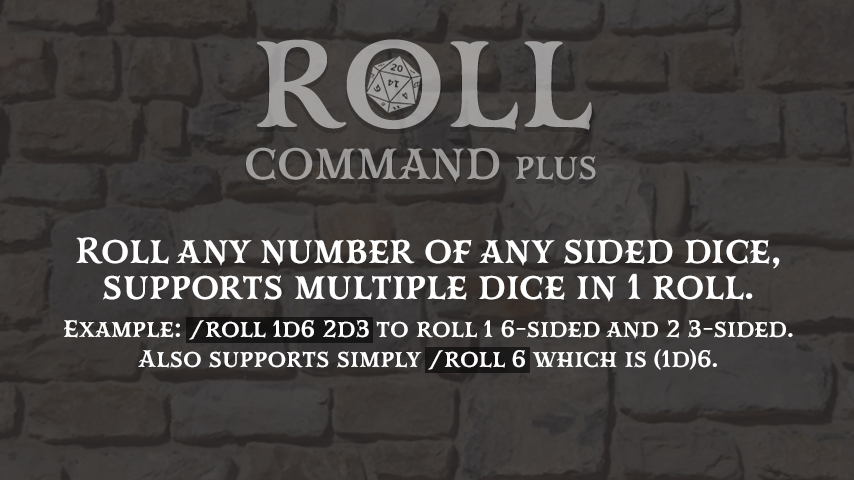
<style>
.page{position:relative;width:854px;height:480px}
.page>*{position:absolute;margin:0}
.t1{font:43.4px "MrDarcy-Bol";color:#a09e9c}
.t2{font:122.4px "MrDarcy-Bol";color:#a09e9c}
.t3{font:31.6px "MrDarcy-Bol";color:#a09e9c}
.t4{font:36px/36px "MrDarcy-Bol";color:#ffffff}
.t5{font:24px/38px "MrDarcy-Bol";color:#ffffff}
.t6{font:24px/30px "MrDarcy-Bol";color:#ffffff}
</style>
<div class="page">
<p class="t1" style="left:246px;top:39px;width:350px;height:143px"><span class="t2">ROLL </span>COMMAND <span class="t3">PLUS</span></p>
<p class="t4" style="left:64px;top:237px;width:729px;height:133px;text-align:center">Roll any number of any sided dice, <br>supports multiple dice in 1 roll. <br><span class="t5">Example: /roll 1d6 2d3 to roll 1 6-sided and 2 3-sided. <br></span><span class="t6">Also supports simply /roll 6 which is (1d)6.</span></p>
</div>
